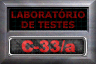
<style>
.page{position:relative;width:96px;height:64px}
.page>*{position:absolute;margin:0}
.t1{font:9px/10px "Verdana-Bold"}
</style>
<div class="page">
<p class="t1" style="left:11px;top:8px;width:74px;height:21px;text-align:center">LABORATÓRIO<br>DE TESTES</p>
</div>
